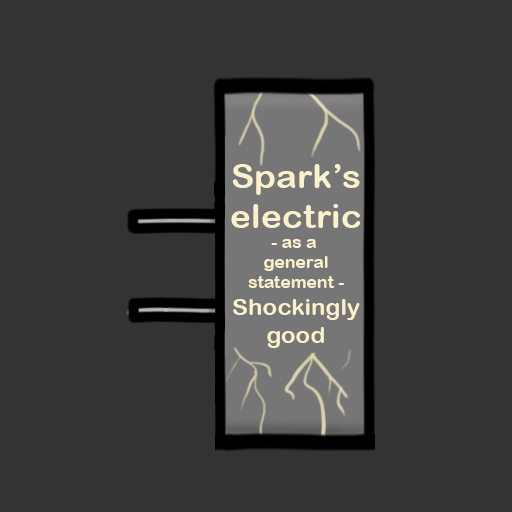
<style>
.page{position:relative;width:512px;height:512px;background:#333333}
.page>*{position:absolute;margin:0}
.t1{font:16.7px "ArialRoundedMTBold";color:#fbf2cb;scale:1.06 1}
.t2{font:33.3px "ArialRoundedMTBold";color:#fbf2cb;scale:1.06 1}
.t3{font:22.9px "ArialRoundedMTBold";color:#fbf2cb;scale:1.06 1}
</style>
<div class="page">
<p class="t1" style="left:231px;top:164px;width:130px;height:184px;text-align:center"><span class="t2">Spark’s<br>electric<br></span>- as a <br>general<br>statement -<br><span class="t3">Shockingly<br>good</span></p>
</div>
